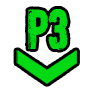
<style>
.page{position:relative;width:93px;height:91px;background:#ffffff}
.page>*{position:absolute;margin:0}
.t1{font:60px "CFJacquesParizeau-Regular";color:#00d914}
</style>
<div class="page">
<p class="t1" style="left:27px;top:9px;width:41px;height:41px">P3</p>
</div>
